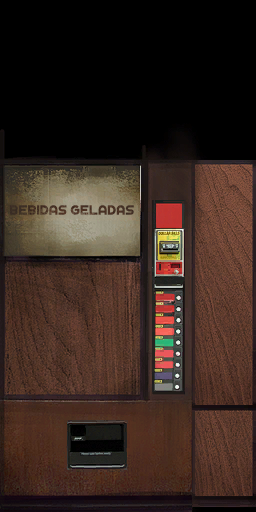
<style>
.page{position:relative;width:256px;height:512px;background:#000000}
.page>*{position:absolute;margin:0}
.t1{font:13.7px "Fingbanger";color:#382c20;text-transform:uppercase;scale:0.97 1}
</style>
<div class="page">
<p class="t1" style="left:10px;top:205px;width:124px;height:10px">bebidas geladas</p>
</div>
